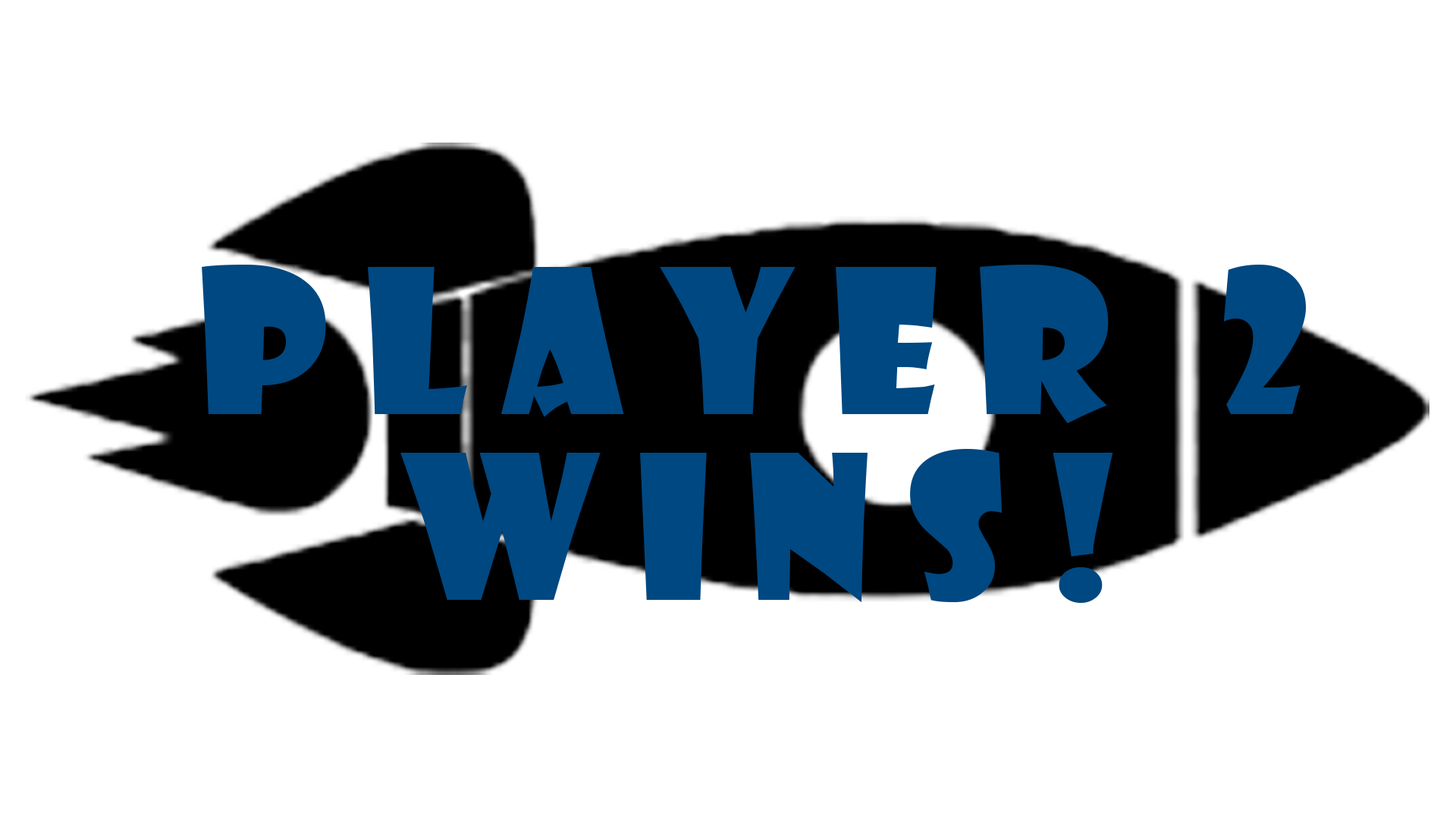
<style>
.page{position:relative;width:1456px;height:819px;background:#ffffff}
.page>*{position:absolute;margin:0}
.t1{font:195.9px "ShowcardGothic-Reg";letter-spacing:0.18em;color:#004881}
</style>
<div class="page">
<p class="t1" style="left:202px;top:265px;width:1104px;height:158px">PLAYER 2</p>
<p class="t1" style="left:400px;top:449px;width:713px;height:154px">WINS!</p>
</div>
